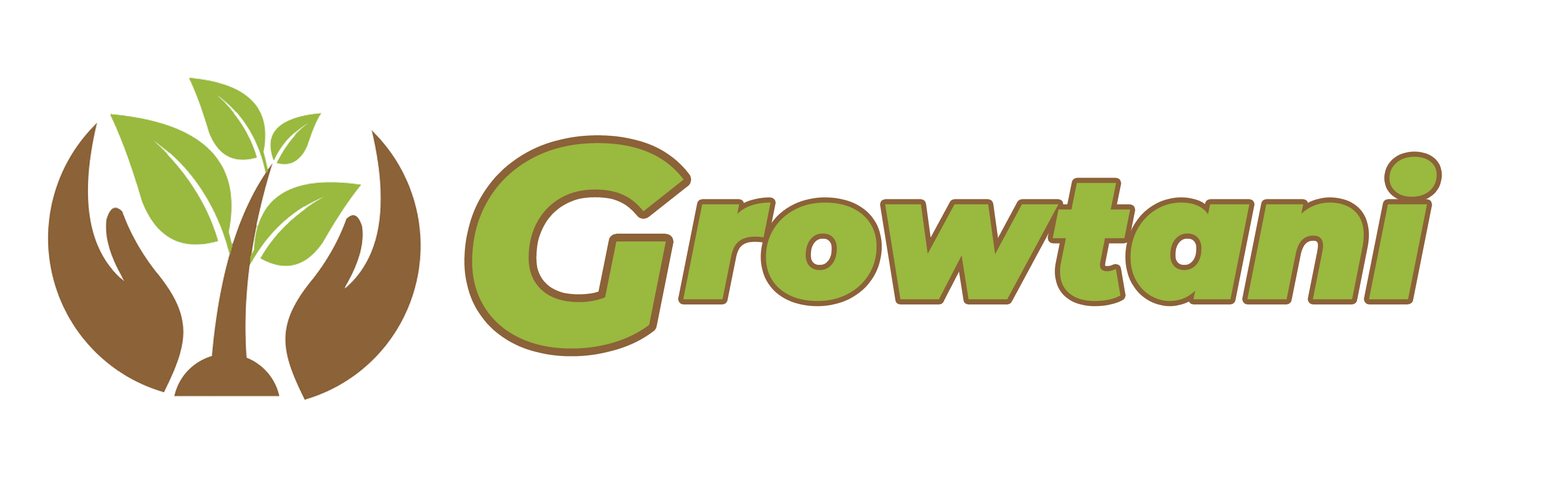
<style>
.page{position:relative;width:1568px;height:485px;background:#ffffff}
.page>*{position:absolute;margin:0}
.t1{font:281.6px "Montserrat-ExtraBoldItalic";color:#9ab93f}
.t2{font:173.3px "Montserrat-BlackItalic";color:#9ab93f}
</style>
<div class="page">
<p class="t1" style="left:472px;top:143px;width:212px;height:205px">G</p>
<p class="t2" style="left:683px;top:156px;width:754px;height:145px">rowtani</p>
</div>
